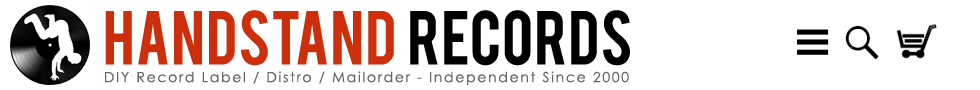
<style>
.page{position:relative;width:980px;height:90px;background:#ffffff}
.page>*{position:absolute;margin:0}
.t1{font:60px "Bebas";color:#cd2e0c}
.t2{font:60px "Bebas";color:#000000}
.t3{font:14px "CenturyGothic";letter-spacing:0.12em;color:#666666}
</style>
<div class="page">
<p class="t1" style="left:105px;top:10px;width:525px;height:56px">Handstand  <span class="t2">Records</span></p>
<p class="t3" style="left:105px;top:71px;width:524px;height:14px">DIY Record Label / Distro / Mailorder - Independent Since 2000</p>
</div>
